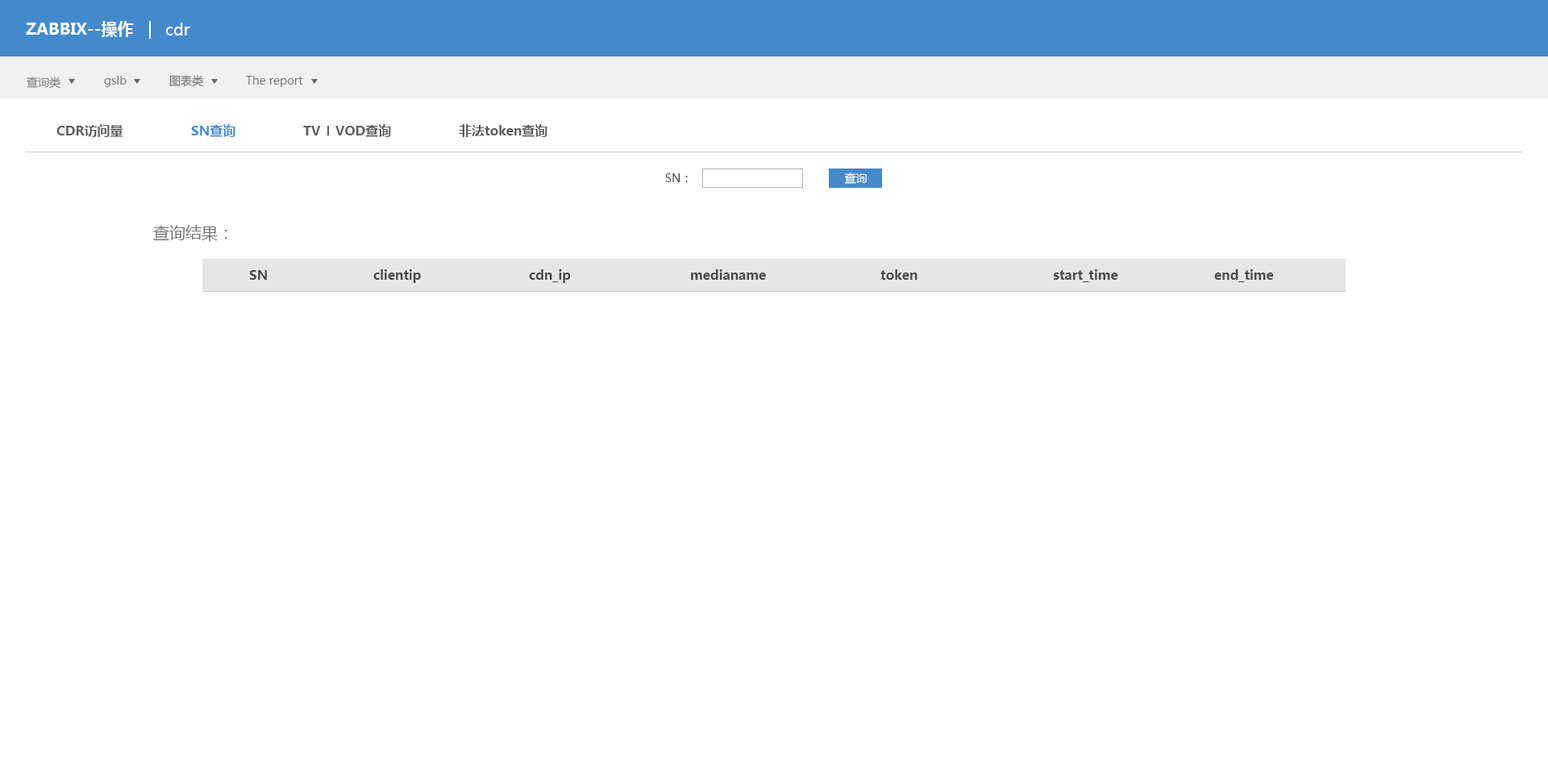
<style>
.page{position:relative;width:1548px;height:770px;background:#ffffff}
.page>*{position:absolute;margin:0}
.t1{font:16.1px "MicrosoftYaHei-Bold";color:#ffffff}
.t2{font:16.1px "MicrosoftYaHei";color:#ffffff}
.t3{font:11.3px "MicrosoftYaHei";color:#828282}
.t4{font:11.3px "MicrosoftYaHei";color:#747474}
.t5{font:12.9px "MicrosoftYaHei-Bold";color:#5b5b5b}
.t6{font:12.9px "MicrosoftYaHei-Bold";color:#448aca}
.t7{font:11.3px "MicrosoftYaHei";color:#4a4a4a}
.t8{font:11.3px "MicrosoftYaHei";color:#ffffff}
.t9{font:16.1px "MicrosoftYaHei";color:#727272}
.t10{font:12.9px "MicrosoftYaHei-Bold";color:#4a4a4a}
</style>
<div class="page">
<p class="t1" style="left:26px;top:21px;width:108px;height:16px">ZABBIX--操作</p>
<p class="t2" style="left:165px;top:23px;width:25px;height:12px">cdr</p>
<p class="t3" style="left:27px;top:77px;width:33px;height:12px">查询类</p>
<p class="t4" style="left:104px;top:76px;width:23px;height:11px">gslb</p>
<p class="t4" style="left:169px;top:75px;width:34px;height:12px">图表类</p>
<p class="t4" style="left:246px;top:76px;width:57px;height:11px">The report</p>
<p class="t5" style="left:56px;top:124px;width:67px;height:13px">CDR访问量</p>
<p class="t6" style="left:191px;top:124px;width:44px;height:13px">SN查询</p>
<p class="t5" style="left:303px;top:126px;width:18px;height:9px">TV</p>
<p class="t5" style="left:335px;top:124px;width:56px;height:13px">VOD查询</p>
<p class="t5" style="left:459px;top:124px;width:89px;height:13px">非法token查询</p>
<p class="t7" style="left:665px;top:173px;width:23px;height:9px">SN：</p>
<p class="t8" style="left:844px;top:173px;width:23px;height:11px">查询</p>
<p class="t9" style="left:153px;top:225px;width:74px;height:16px">查询结果：</p>
<p class="t10" style="left:373px;top:269px;width:48px;height:14px">clientip</p>
<p class="t10" style="left:529px;top:269px;width:42px;height:14px">cdn_ip</p>
<p class="t10" style="left:691px;top:269px;width:75px;height:11px">medianame</p>
<p class="t10" style="left:881px;top:269px;width:37px;height:11px">token</p>
<p class="t10" style="left:1053px;top:269px;width:66px;height:13px">start_time</p>
<p class="t10" style="left:1214px;top:269px;width:60px;height:13px">end_time</p>
<p class="t10" style="left:249px;top:270px;width:18px;height:10px">SN</p>
</div>
